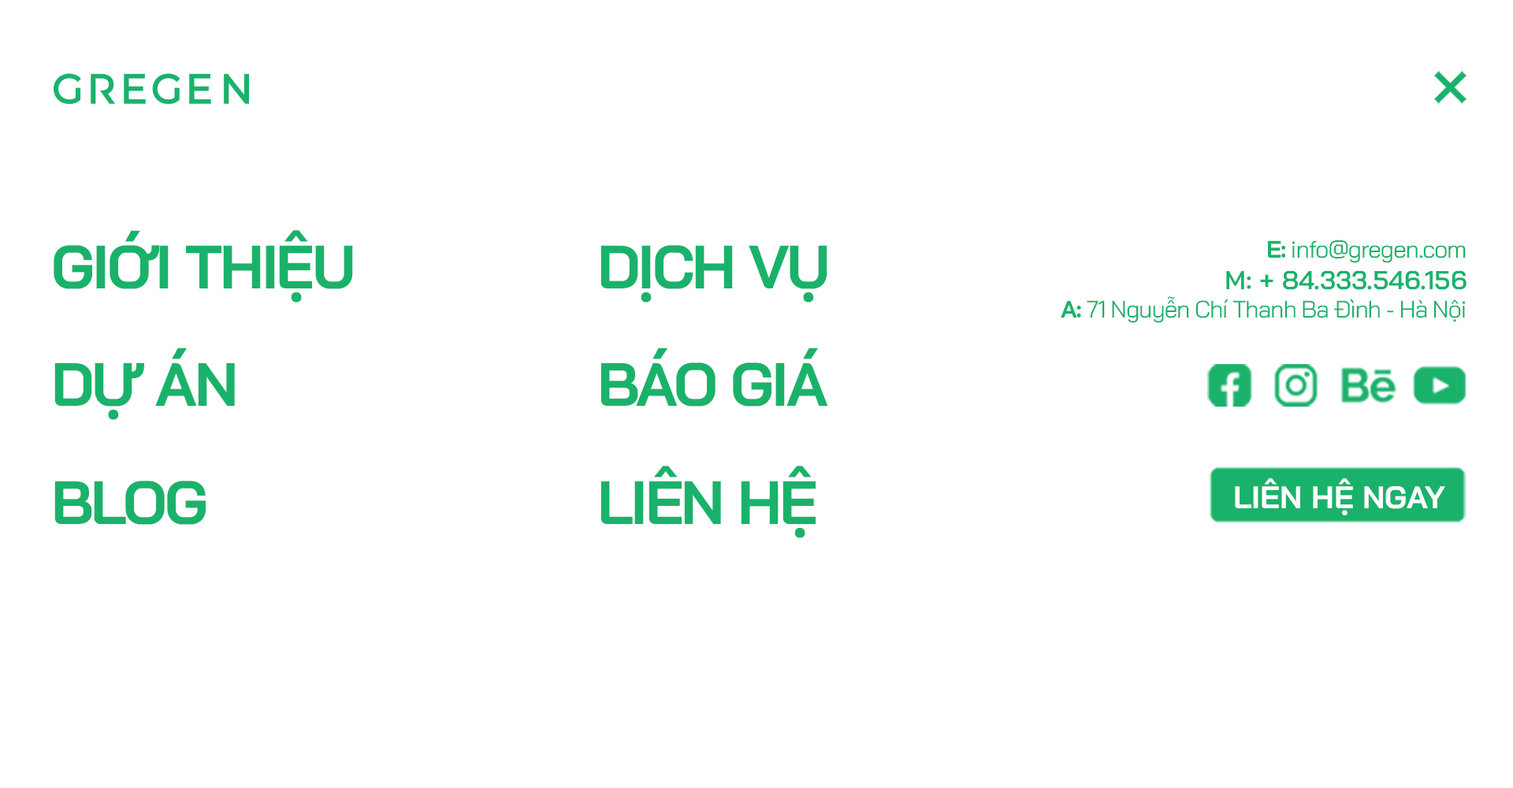
<style>
.page{position:relative;width:1513px;height:788px;background:#ffffff}
.page>*{position:absolute;margin:0}
.t1{font:60.9px/117.8px "BaiJamjuree-Bold";letter-spacing:-0.04em;color:#1ab26b}
.t2{font:23.9px "BaiJamjuree-Regular";letter-spacing:-0.04em;color:#1ab26b}
.t3{font:23.9px "BaiJamjuree-Bold";letter-spacing:-0.04em;color:#1ab26b}
.t4{font:26px "BaiJamjuree-SemiBold";color:#1ab26b}
.t5{font:31.3px "BaiJamjuree-Bold";color:#ffffff}
</style>
<div class="page">
<p class="t1" style="left:54px;top:230px;width:774px;height:308px;text-align:justify">GIỚI THIỆU DỊCH VỤ<br>DỰ ÁN BÁO GIÁ<br>BLOG LIÊN HỆ</p>
<p class="t2" style="left:1061px;top:240px;width:406px;height:83px;text-align:right"><span class="t3">E:</span> info@gregen.com<br><span class="t4">M: + 84.333.546.156<br></span><span class="t3">A: </span>71 Nguyễn Chí Thanh Ba Đình - Hà Nội</p>
<p class="t5" style="left:1235px;top:478px;width:210px;height:37px">LIÊN HỆ NGAY</p>
</div>
